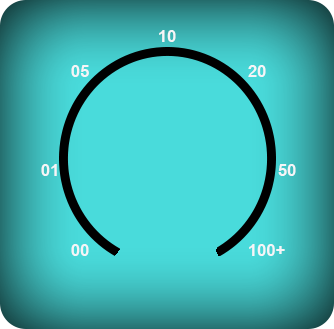
<style>
.page{position:relative;width:334px;height:329px;background:#49dbdb}
.page>*{position:absolute;margin:0}
.t1{font:16px "Arial-BoldMT";color:#f5f5f7;scale:1.04 1}
</style>
<div class="page">
<p class="t1" style="left:159px;top:30px;width:17px;height:12px">10</p>
<p class="t1" style="left:71px;top:65px;width:18px;height:12px">05</p>
<p class="t1" style="left:248px;top:65px;width:18px;height:12px">20</p>
<p class="t1" style="left:41px;top:164px;width:16px;height:12px">01</p>
<p class="t1" style="left:278px;top:164px;width:18px;height:12px">50</p>
<p class="t1" style="left:71px;top:244px;width:18px;height:12px">00</p>
<p class="t1" style="left:249px;top:244px;width:36px;height:12px">100+</p>
</div>
